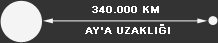
<style>
.page{position:relative;width:218px;height:43px;background:#333333}
.page>*{position:absolute;margin:0}
.t1{font:10px "Arial-BoldMT";color:#ffffff;font-weight:bold}
</style>
<div class="page">
<p class="t1" style="left:92px;top:6px;width:67px;height:7px">340.000 KM</p>
<p class="t1" style="left:85px;top:24px;width:85px;height:10px">AY’A UZAKLIĞI</p>
</div>
